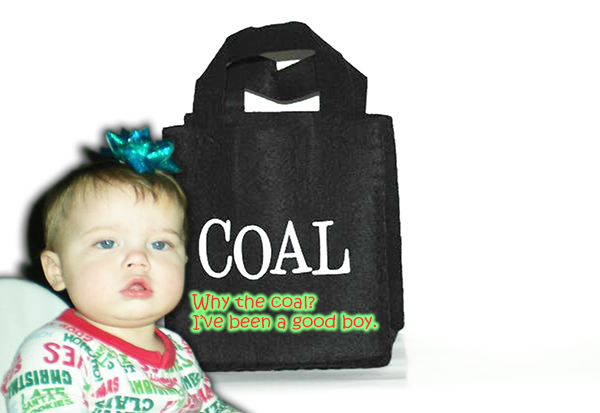
<style>
.page{position:relative;width:600px;height:413px;background:#ffffff}
.page>*{position:absolute;margin:0}
.t1{font:16.8px "KristenITC-Regular";color:#ff3333;scale:1.09 1}
</style>
<div class="page">
<p class="t1" style="left:191px;top:294px;width:186px;height:36px">Why the coal?<br>I’ve been a good boy.</p>
</div>
